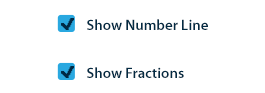
<style>
.page{position:relative;width:265px;height:93px;background:#ffffff}
.page>*{position:absolute;margin:0}
.t1{font:14.9px "MyriadPro-Semibold";color:#032b43}
</style>
<div class="page">
<p class="t1" style="left:87px;top:19px;width:121px;height:11px">Show Number Line</p>
<p class="t1" style="left:87px;top:67px;width:97px;height:11px">Show Fractions</p>
</div>
